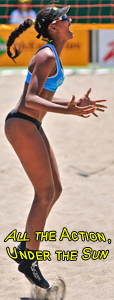
<style>
.page{position:relative;width:114px;height:300px}
.page>*{position:absolute;margin:0}
.t1{font:14px "ArialMT";color:#f6ff00;font-variant:small-caps}
</style>
<div class="page">
<p class="t1" style="left:4px;top:228px;width:107px;height:32px;text-align:center">All the Action,<br>Under the Sun</p>
</div>
